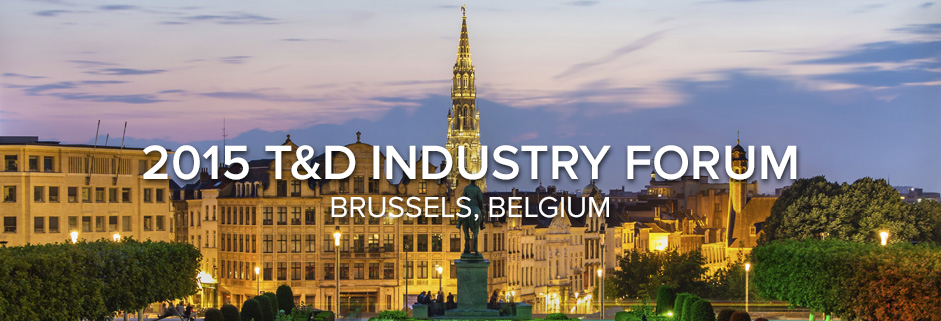
<style>
.page{position:relative;width:941px;height:321px}
.page>*{position:absolute;margin:0}
.t1{font:50px/19px "ProximaNova-Semibold";color:#ffffff}
.t2{font:30px/19px "ProximaNova-Regular";color:#ffffff}
</style>
<div class="page">
<p class="t1" style="left:143px;top:145px;width:654px;height:76px;text-align:center">2015 T&amp;D INDUSTRY FORUM<br><span class="t2"><br>BRUSSELS, BELGIUM</span></p>
</div>
